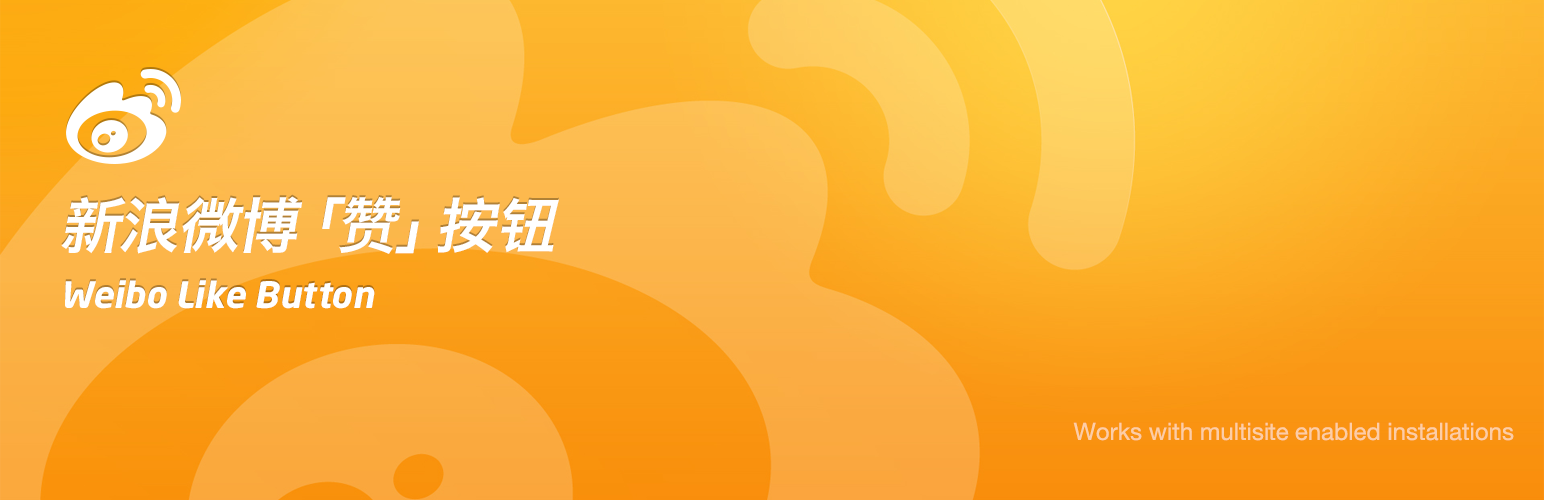
<style>
.page{position:relative;width:1544px;height:500px}
.page>*{position:absolute;margin:0}
.t1{font:36px/60px "NeoSansPro-BoldItalic";color:#ffffff}
.t2{font:60px "HiraginoSansGB-W6";color:#ffffff;font-style:italic}
.t3{font:24px "HelveticaNeue";color:#fccda6}
</style>
<div class="page">
<p class="t1" style="left:61px;top:196px;width:498px;height:113px"><span class="t2">新浪微博「赞」按钮<br></span>Weibo Like Button</p>
<p class="t3" style="left:1073px;top:422px;width:441px;height:19px">Works with multisite enabled installations</p>
</div>
